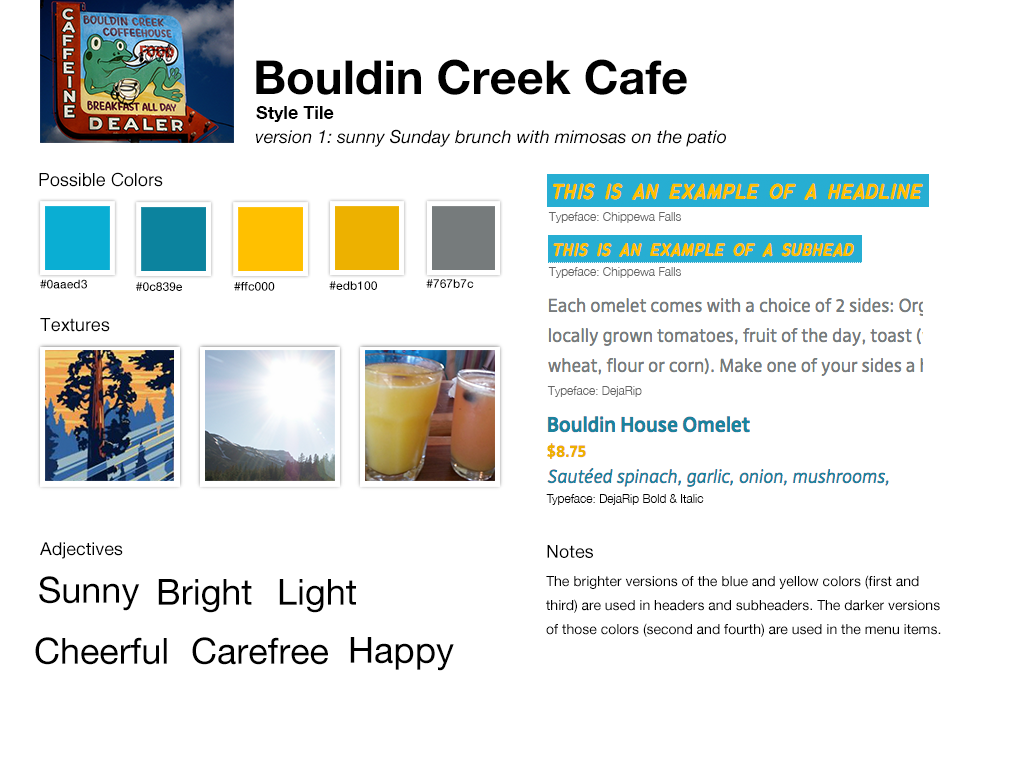
<style>
.page{position:relative;width:1020px;height:760px;background:#ffffff}
.page>*{position:absolute;margin:0}
.t1{font:47px "HelveticaNeue-Bold";color:#000000}
.t2{font:18px "HelveticaNeue-Bold";color:#000000}
.t3{font:18px "HelveticaNeue-Italic";color:#000000}
.t4{font:18px "Helvetica";color:#000000}
.t5{font:12px "HelveticaNeue-Light";color:#666666}
.t6{font:12px "HelveticaNeue-Medium";color:#000000}
.t7{font:12px "HelveticaNeue-Light";color:#000000}
.t8{font:18px "HelveticaNeue";color:#000000}
.t9{font:36px "HelveticaNeue";color:#000000}
.t10{font:14px/24px "HelveticaNeue";color:#000000}
</style>
<div class="page">
<p class="t1" style="left:256px;top:59px;width:431px;height:36px">Bouldin Creek Cafe</p>
<p class="t2" style="left:256px;top:106px;width:78px;height:16px">Style Tile</p>
<p class="t3" style="left:255px;top:129px;width:471px;height:18px">version 1: sunny Sunday brunch with mimosas on the patio</p>
<p class="t4" style="left:39px;top:172px;width:124px;height:15px">Possible Colors</p>
<p class="t5" style="left:548px;top:212px;width:133px;height:11px">Typeface: Chippewa Falls</p>
<p class="t5" style="left:548px;top:267px;width:133px;height:11px">Typeface: Chippewa Falls</p>
<p class="t6" style="left:40px;top:279px;width:47px;height:10px">#0aaed3</p>
<p class="t6" style="left:329px;top:281px;width:48px;height:9px">#edb100</p>
<p class="t6" style="left:426px;top:279px;width:48px;height:9px">#767b7c</p>
<p class="t6" style="left:136px;top:282px;width:46px;height:9px">#0c839e</p>
<p class="t6" style="left:234px;top:282px;width:41px;height:9px">#ffc000</p>
<p class="t4" style="left:40px;top:318px;width:70px;height:14px">Textures</p>
<p class="t5" style="left:547px;top:386px;width:95px;height:11px">Typeface: DejaRip</p>
<p class="t7" style="left:546px;top:494px;width:158px;height:11px">Typeface: DejaRip Bold &amp; Italic</p>
<p class="t8" style="left:40px;top:542px;width:83px;height:17px">Adjectives</p>
<p class="t8" style="left:547px;top:545px;width:46px;height:13px">Notes</p>
<p class="t9" style="left:39px;top:576px;width:101px;height:35px">Sunny</p>
<p class="t9" style="left:158px;top:579px;width:94px;height:34px">Bright</p>
<p class="t9" style="left:279px;top:579px;width:77px;height:34px">Light</p>
<p class="t10" style="left:546px;top:575px;width:395px;height:62px">The brighter versions of the blue and yellow colors (first and third) are used in headers and subheaders. The darker versions of those colors (second and fourth) are used in the menu items.</p>
<p class="t9" style="left:35px;top:637px;width:132px;height:28px">Cheerful</p>
<p class="t9" style="left:192px;top:637px;width:136px;height:28px">Carefree</p>
<p class="t9" style="left:350px;top:637px;width:104px;height:34px">Happy</p>
</div>
